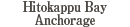
<style>
.page{position:relative;width:130px;height:27px;background:#ffffff}
.page>*{position:absolute;margin:0}
.t1{font:14px/13px "RyuminPro-ExBold";letter-spacing:-0.04em;color:#4c4843;scale:0.9 1}
</style>
<div class="page">
<p class="t1" style="left:22px;top:1px;width:85px;height:26px;text-align:center">Hitokappu Bay<br>Anchorage</p>
</div>
